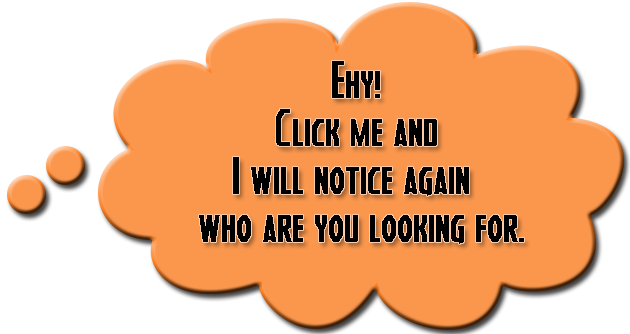
<style>
.page{position:relative;width:630px;height:334px;background:#fb974d}
.page>*{position:absolute;margin:0}
.t1{font:40px "HeroesAssemble";color:#000000}
</style>
<div class="page">
<p class="t1" style="left:199px;top:61px;width:325px;height:183px;text-align:center">Ehy! <br>Click me and <br>I will notice again  <br>who are you looking for.</p>
</div>
